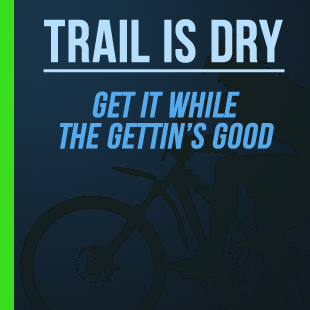
<style>
.page{position:relative;width:310px;height:310px}
.page>*{position:absolute;margin:0}
.t1{font:36px "BebasNeue";color:#55aaec;font-weight:bold;font-style:italic}
.t2{font:60px "BebasNeue";color:#b6dffe;font-weight:bold;text-decoration:underline}
</style>
<div class="page">
<p class="t1" style="left:43px;top:19px;width:242px;height:130px;text-align:center"><span class="t2">Trail is dry<br></span>Get it WHILE<br>the Gettin’s Good</p>
</div>
